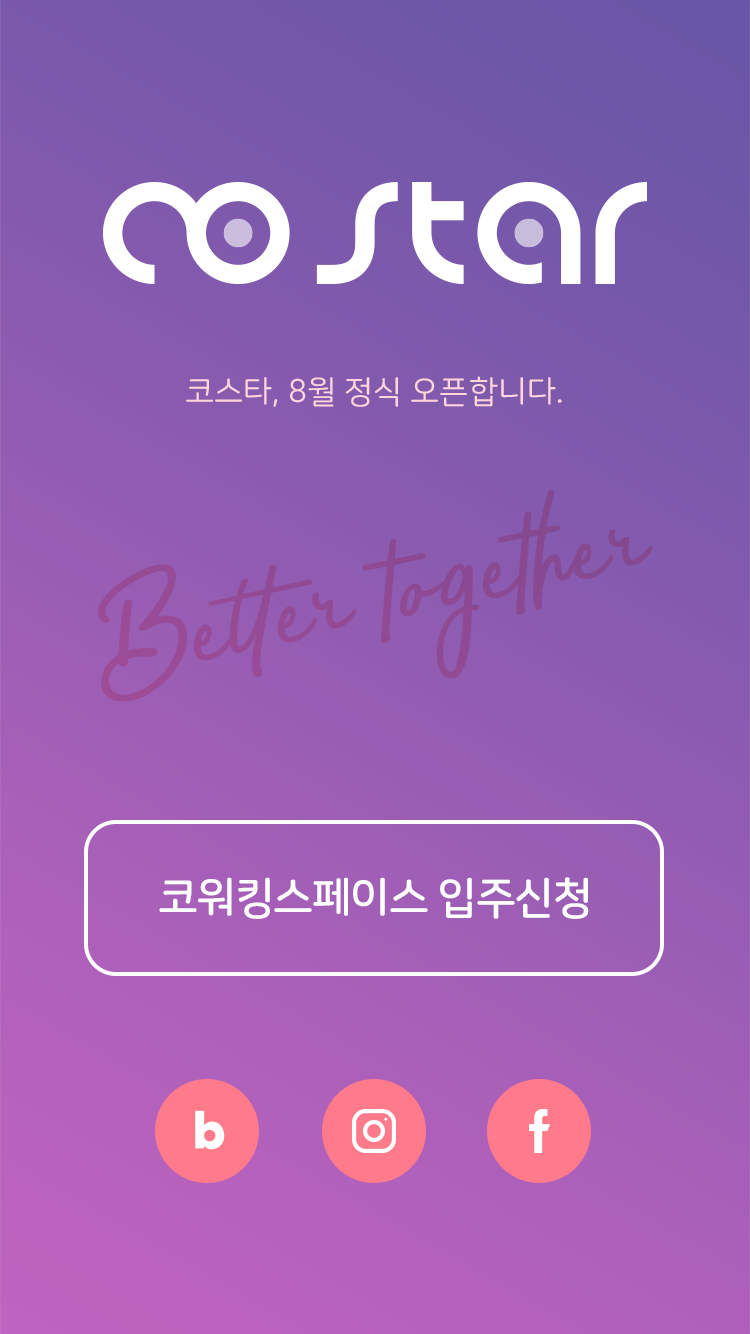
<style>
.page{position:relative;width:750px;height:1334px}
.page>*{position:absolute;margin:0}
.t1{font:32px "NanumSquareRoundR";color:#ffd6db;text-transform:uppercase}
.t2{font:152px "Bahagia";color:#914a94}
.t3{font:44px "NanumSquareRoundB";letter-spacing:-0.035em;color:#ffffff;text-transform:uppercase}
</style>
<div class="page">
<p class="t1" style="left:186px;top:376px;width:376px;height:31px">코스타, 8월 정식 오픈합니다.</p>
<p class="t2" style="left:98px;top:489px;width:555px;height:213px;rotate:-12deg">Better together</p>
<p class="t3" style="left:159px;top:877px;width:430px;height:42px">코워킹스페이스 입주신청</p>
</div>
